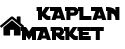
<style>
.page{position:relative;width:125px;height:49px;background:#ffffff}
.page>*{position:absolute;margin:0}
.t1{font:20px "DistantGalaxy";color:#000000}
</style>
<div class="page">
<p class="t1" style="left:20px;top:7px;width:100px;height:33px">KAPLAN<br>MARKET</p>
</div>
